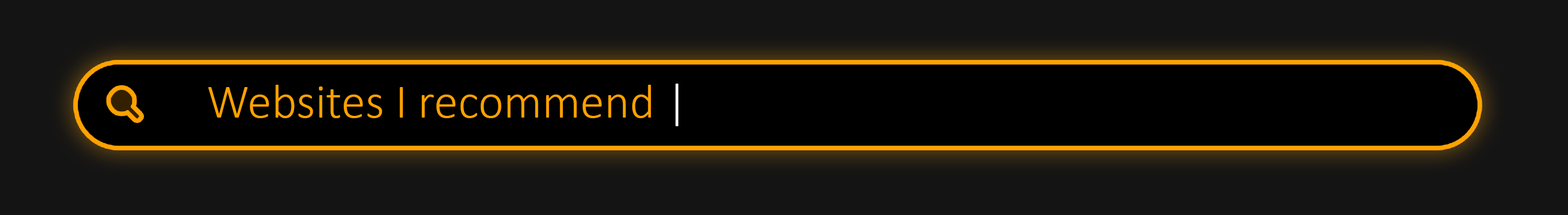
<style>
.page{position:relative;width:1568px;height:215px;background:#141414}
.page>*{position:absolute;margin:0}
.t1{font:48.5px "Calibri-Light";color:#ffa200}
.t2{font:48.5px "Calibri-Light";color:#ffffff}
</style>
<div class="page">
<p class="t1" style="left:208px;top:83px;width:471px;height:43px">Websites I recommend <span class="t2">|</span></p>
</div>
